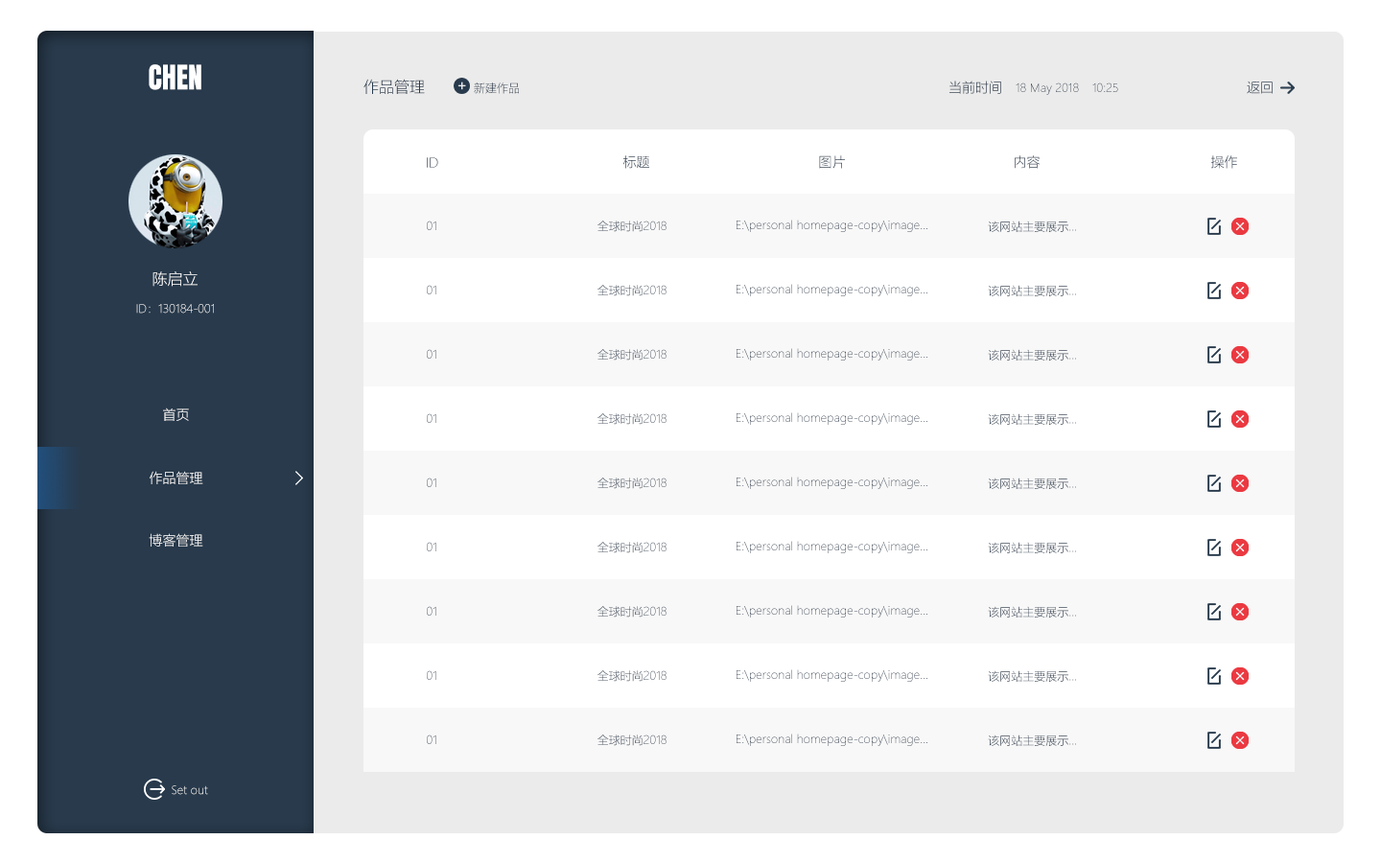
<style>
.page{position:relative;width:1381px;height:863px;background:#ffffff}
.page>*{position:absolute;margin:0}
.t1{font:28.8px "Anton-Regular";color:#ffffff}
.t2{font:15.3px "MicrosoftYaHeiLight";color:#283a4c}
.t3{font:11.5px "MicrosoftYaHeiLight"}
.t4{font:13.4px "MicrosoftYaHeiLight"}
.t5{font:11.5px "MicrosoftYaHeiLight";color:#283a4c}
.t6{font:13.4px "MicrosoftYaHeiLight";color:#283a4c}
.t7{font:15.3px "MicrosoftYaHeiLight";color:#ffffff}
.t8{font:13.4px "MicrosoftYaHeiLight";color:#ffffff}
</style>
<div class="page">
<p class="t1" style="left:149px;top:64px;width:52px;height:26px">CHEN</p>
<p class="t2" style="left:364px;top:79px;width:61px;height:15px">作品管理</p>
<p class="t3" style="left:474px;top:82px;width:45px;height:12px">新建作品</p>
<p class="t4" style="left:950px;top:81px;width:51px;height:13px">当前时间</p>
<p class="t5" style="left:1016px;top:82px;width:63px;height:13px">18 May 2018</p>
<p class="t3" style="left:1093px;top:82px;width:25px;height:10px">10:25</p>
<p class="t4" style="left:1247px;top:81px;width:26px;height:13px">返回</p>
<p class="t4" style="left:427px;top:157px;width:11px;height:11px">ID</p>
<p class="t4" style="left:623px;top:155px;width:26px;height:14px">标题</p>
<p class="t4" style="left:819px;top:155px;width:26px;height:14px">图片</p>
<p class="t4" style="left:1015px;top:155px;width:25px;height:14px">内容</p>
<p class="t6" style="left:1211px;top:155px;width:26px;height:14px">操作</p>
<p class="t3" style="left:427px;top:221px;width:9px;height:9px">01</p>
<p class="t3" style="left:598px;top:221px;width:69px;height:11px">全球时尚2018</p>
<p class="t3" style="left:737px;top:220px;width:191px;height:12px">E:\personal homepage-copy\image...</p>
<p class="t3" style="left:988px;top:221px;width:88px;height:11px">该网站主要展示...</p>
<p class="t7" style="left:153px;top:271px;width:45px;height:16px">陈启立</p>
<p class="t3" style="left:427px;top:285px;width:9px;height:9px">01</p>
<p class="t3" style="left:598px;top:285px;width:69px;height:11px">全球时尚2018</p>
<p class="t3" style="left:737px;top:284px;width:191px;height:12px">E:\personal homepage-copy\image...</p>
<p class="t3" style="left:988px;top:285px;width:88px;height:11px">该网站主要展示...</p>
<p class="t3" style="left:136px;top:304px;width:78px;height:10px">ID：130184-001</p>
<p class="t3" style="left:427px;top:349px;width:9px;height:10px">01</p>
<p class="t3" style="left:598px;top:349px;width:69px;height:12px">全球时尚2018</p>
<p class="t3" style="left:737px;top:348px;width:191px;height:13px">E:\personal homepage-copy\image...</p>
<p class="t3" style="left:988px;top:349px;width:88px;height:12px">该网站主要展示...</p>
<p class="t4" style="left:163px;top:408px;width:26px;height:13px">首页</p>
<p class="t3" style="left:427px;top:413px;width:9px;height:10px">01</p>
<p class="t3" style="left:598px;top:413px;width:69px;height:12px">全球时尚2018</p>
<p class="t3" style="left:737px;top:412px;width:191px;height:13px">E:\personal homepage-copy\image...</p>
<p class="t3" style="left:988px;top:413px;width:88px;height:12px">该网站主要展示...</p>
<p class="t8" style="left:150px;top:471px;width:53px;height:13px">作品管理</p>
<p class="t3" style="left:427px;top:478px;width:9px;height:9px">01</p>
<p class="t3" style="left:598px;top:478px;width:69px;height:11px">全球时尚2018</p>
<p class="t3" style="left:737px;top:477px;width:191px;height:12px">E:\personal homepage-copy\image...</p>
<p class="t3" style="left:988px;top:478px;width:88px;height:11px">该网站主要展示...</p>
<p class="t8" style="left:149px;top:533px;width:54px;height:14px">博客管理</p>
<p class="t3" style="left:427px;top:542px;width:9px;height:10px">01</p>
<p class="t3" style="left:598px;top:542px;width:69px;height:11px">全球时尚2018</p>
<p class="t3" style="left:737px;top:541px;width:191px;height:12px">E:\personal homepage-copy\image...</p>
<p class="t3" style="left:988px;top:542px;width:88px;height:11px">该网站主要展示...</p>
<p class="t3" style="left:737px;top:605px;width:191px;height:13px">E:\personal homepage-copy\image...</p>
<p class="t3" style="left:427px;top:606px;width:9px;height:10px">01</p>
<p class="t3" style="left:598px;top:606px;width:69px;height:12px">全球时尚2018</p>
<p class="t3" style="left:988px;top:606px;width:88px;height:12px">该网站主要展示...</p>
<p class="t3" style="left:427px;top:670px;width:9px;height:10px">01</p>
<p class="t3" style="left:598px;top:670px;width:69px;height:12px">全球时尚2018</p>
<p class="t3" style="left:737px;top:670px;width:191px;height:12px">E:\personal homepage-copy\image...</p>
<p class="t3" style="left:988px;top:670px;width:88px;height:12px">该网站主要展示...</p>
<p class="t3" style="left:427px;top:735px;width:9px;height:9px">01</p>
<p class="t3" style="left:598px;top:735px;width:69px;height:11px">全球时尚2018</p>
<p class="t3" style="left:737px;top:734px;width:191px;height:12px">E:\personal homepage-copy\image...</p>
<p class="t3" style="left:988px;top:735px;width:88px;height:11px">该网站主要展示...</p>
<p class="t3" style="left:172px;top:786px;width:36px;height:9px">Set out</p>
</div>
